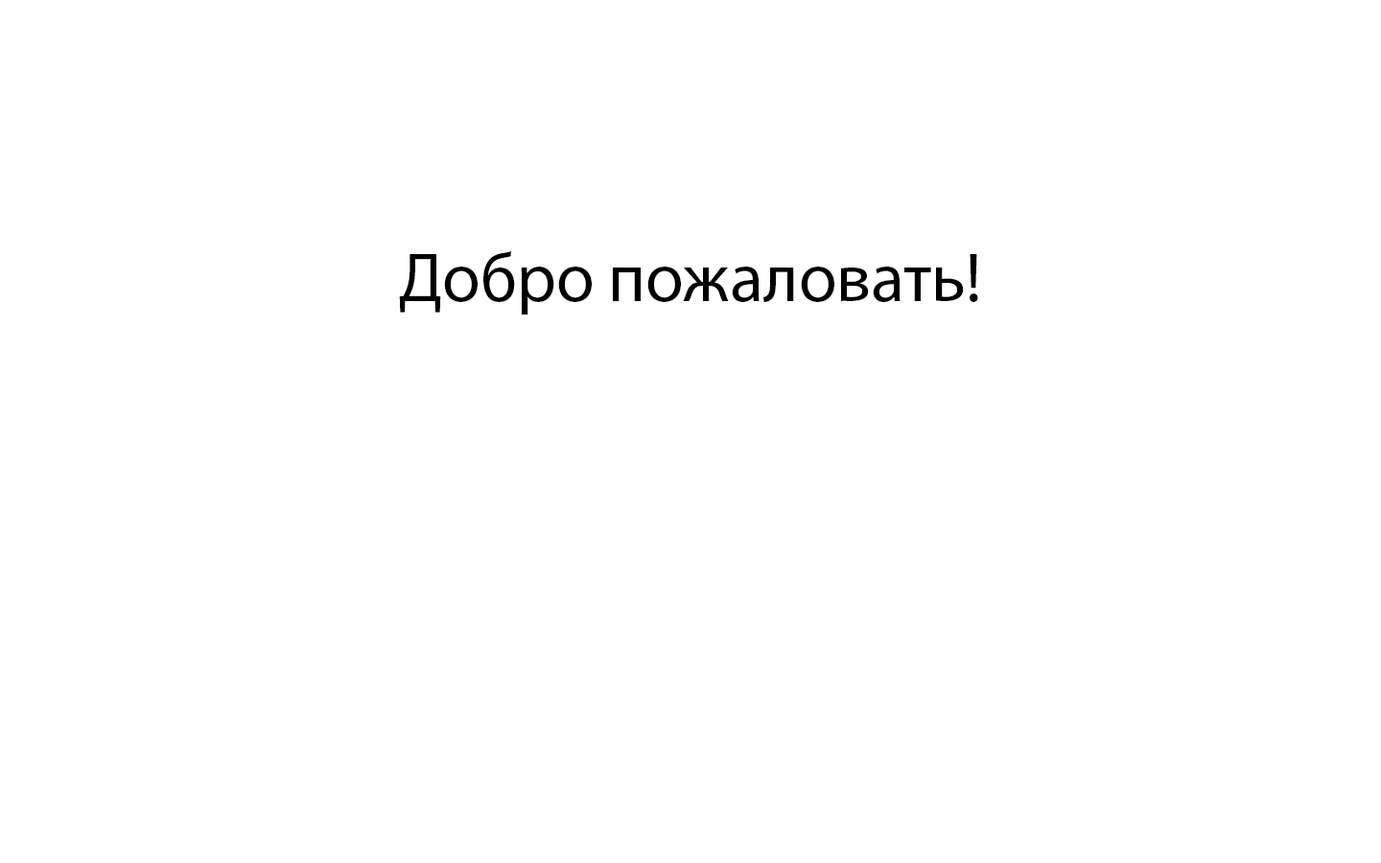
<style>
.page{position:relative;width:1381px;height:863px;background:#ffffff}
.page>*{position:absolute;margin:0}
.t1{font:69.1px "MyriadPro-Regular";color:#000000}
</style>
<div class="page">
<p class="t1" style="left:399px;top:251px;width:579px;height:64px">Добро пожаловать!</p>
</div>
